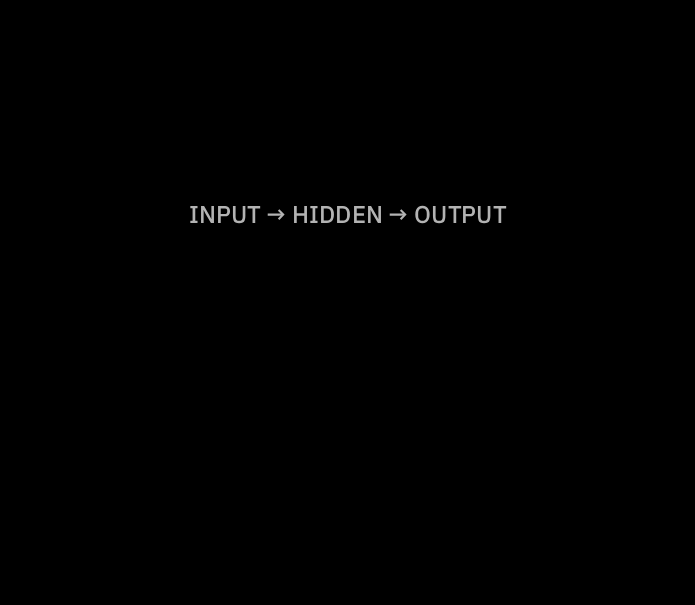
<style>
.page{position:relative;width:695px;height:605px;background:#000000}
.page>*{position:absolute;margin:0}
.t1{font:24.2px "IBMPlexSans-Medium";color:#b3b3b3}
</style>
<div class="page">
<p class="t1" style="left:190px;top:205px;width:317px;height:19px">INPUT → HIDDEN → OUTPUT</p>
</div>
